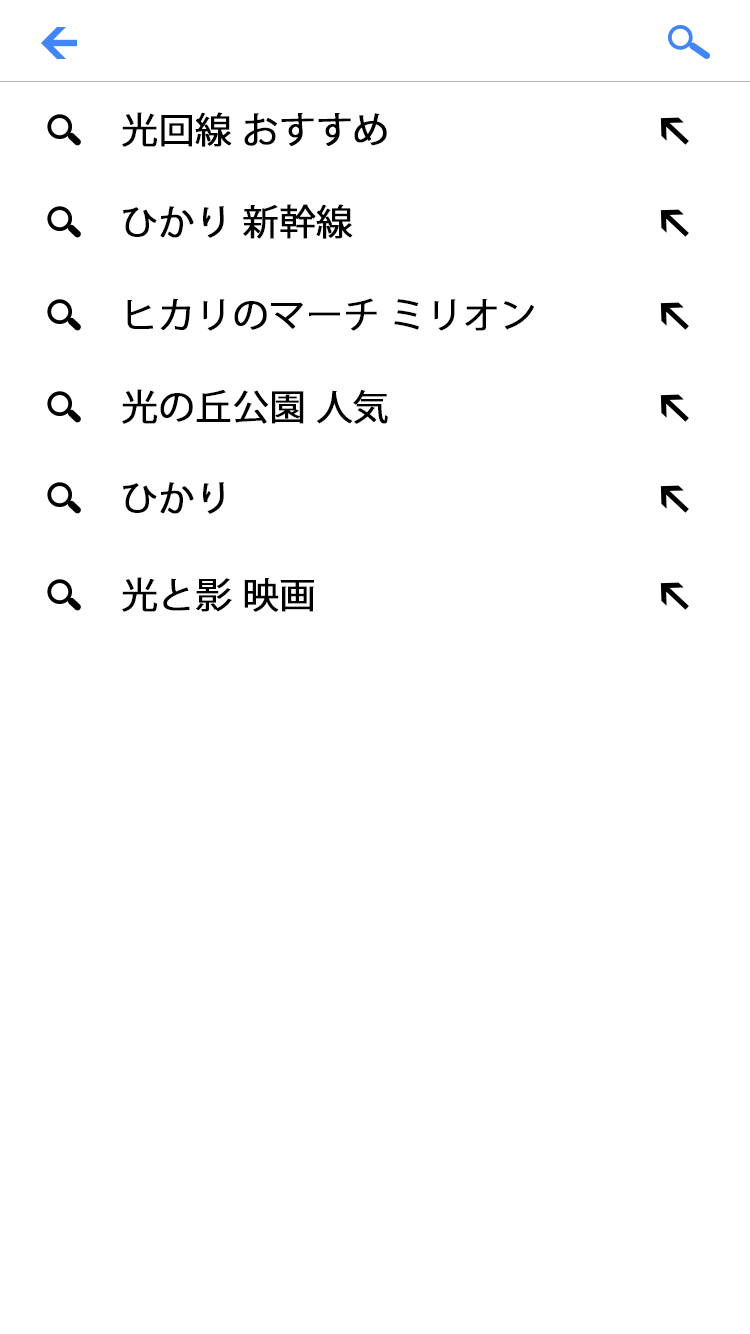
<style>
.page{position:relative;width:750px;height:1334px;background:#ffffff}
.page>*{position:absolute;margin:0}
.t1{font:36px "KozGoPr6N-Regular";font-weight:bold}
.t2{font:36px "KozGoPr6N-Regular";color:#000000;font-weight:bold}
</style>
<div class="page">
<p class="t1" style="left:122px;top:112px;width:109px;height:35px">光の匣</p>
<p class="t1" style="left:122px;top:112px;width:144px;height:35px">光の速さ</p>
<p class="t2" style="left:122px;top:112px;width:265px;height:35px">光回線 おすすめ</p>
<p class="t2" style="left:123px;top:204px;width:230px;height:35px">ひかり 新幹線</p>
<p class="t1" style="left:123px;top:298px;width:218px;height:34px">ひかりの葡萄</p>
<p class="t2" style="left:127px;top:298px;width:407px;height:33px">ヒカリのマーチ ミリオン</p>
<p class="t1" style="left:122px;top:389px;width:193px;height:35px">光の匣 退会</p>
<p class="t1" style="left:122px;top:389px;width:266px;height:35px">光の速さ 調べ方</p>
<p class="t2" style="left:122px;top:389px;width:144px;height:35px">光の速さ</p>
<p class="t2" style="left:122px;top:389px;width:266px;height:35px">光の丘公園 人気</p>
<p class="t2" style="left:123px;top:482px;width:101px;height:32px">ひかり</p>
<p class="t1" style="left:122px;top:577px;width:193px;height:35px">光の匣 宗教</p>
<p class="t2" style="left:122px;top:577px;width:192px;height:35px">光と影 映画</p>
</div>
